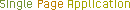
<style>
.page{position:relative;width:130px;height:10px;background:#ffffff}
.page>*{position:absolute;margin:0}
.t1{font:15px "PixelOperator";color:#a4a400}
.t2{font:15px "PixelOperator";color:#719231}
.t3{font:15px "PixelOperator";color:#bc8000}
</style>
<div class="page">
<p class="t1" style="left:0px;top:0px;width:130px;height:10px"><span class="t2">Single </span><span class="t3">Page </span>Application</p>
</div>
